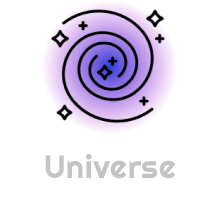
<style>
.page{position:relative;width:216px;height:216px;background:#ffffff}
.page>*{position:absolute;margin:0}
.t1{font:32px "Righteous-Regular";letter-spacing:0.02em;color:#c4c4c4}
</style>
<div class="page">
<p class="t1" style="left:45px;top:154px;width:131px;height:25px">Universe</p>
</div>
